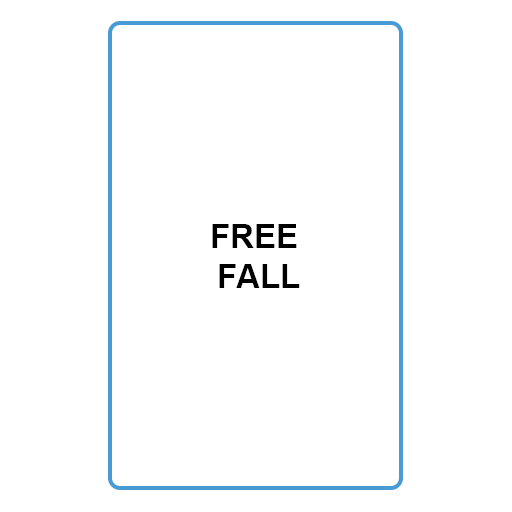
<style>
.page{position:relative;width:512px;height:512px;background:#ffffff}
.page>*{position:absolute;margin:0}
.t1{font:33.3px "Arial-BoldMT";color:#000000}
</style>
<div class="page">
<p class="t1" style="left:212px;top:224px;width:88px;height:64px;text-align:center">FREE <br>FALL</p>
</div>
